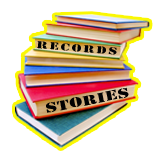
<style>
.page{position:relative;width:165px;height:165px;background:#ffffff}
.page>*{position:absolute;margin:0}
.t1{font:10.6px "Stencil";letter-spacing:0.14em;color:#020202;scale:1.44 1}
.t2{font:14.2px "Stencil";letter-spacing:0.02em;color:#020202;scale:1.44 1}
</style>
<div class="page">
<p class="t1" style="left:37px;top:41px;width:80px;height:14px;rotate:5deg">Records</p>
<p class="t2" style="left:46px;top:87px;width:83px;height:26px;rotate:-11deg">STORIES</p>
</div>
